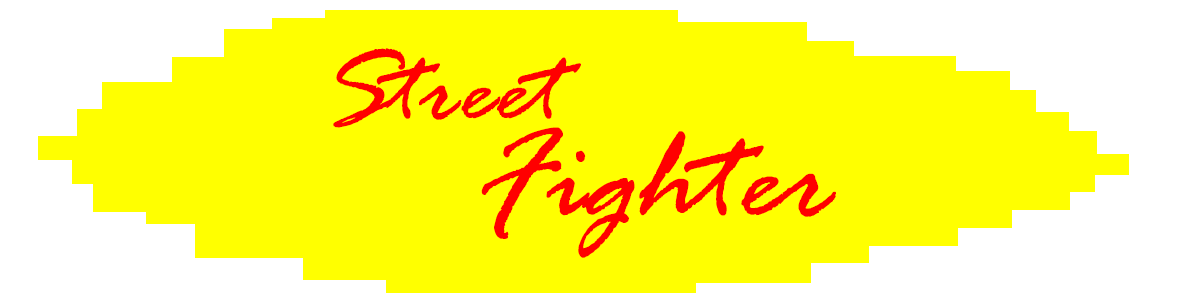
<style>
.page{position:relative;width:1200px;height:300px;background:#ffff00}
.page>*{position:absolute;margin:0}
.t1{font:110px "RageItalic";color:#ff0000}
.t2{font:139px "RageItalic";color:#ff0000}
</style>
<div class="page">
<p class="t1" style="left:333px;top:48px;width:248px;height:80px">Street</p>
<p class="t2" style="left:481px;top:127px;width:355px;height:131px">Fighter</p>
</div>
